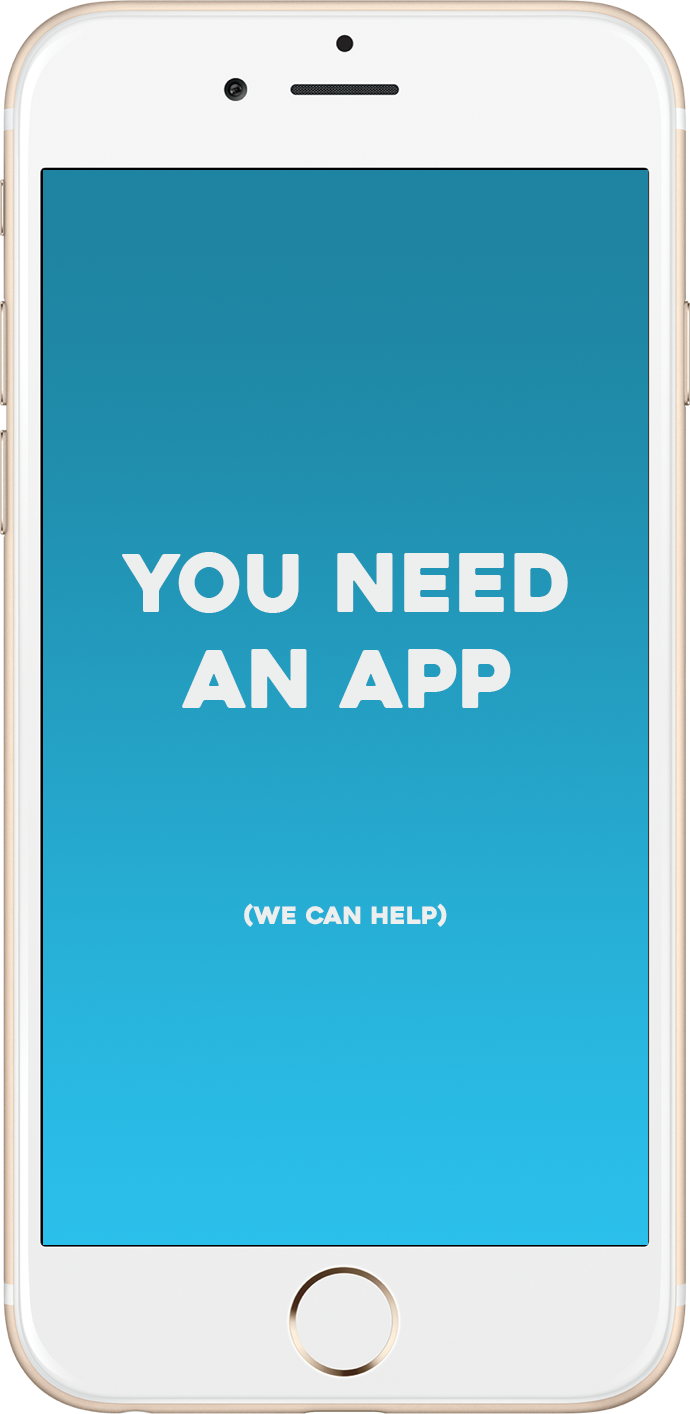
<style>
.page{position:relative;width:690px;height:1414px}
.page>*{position:absolute;margin:0}
.t1{font:80px "Heavitas";color:#edefef}
.t2{font:24px "Heavitas";color:#edefef}
</style>
<div class="page">
<p class="t1" style="left:122px;top:552px;width:446px;height:156px;text-align:center">You need<br>an App</p>
<p class="t2" style="left:244px;top:903px;width:203px;height:24px">(we can help)</p>
</div>
